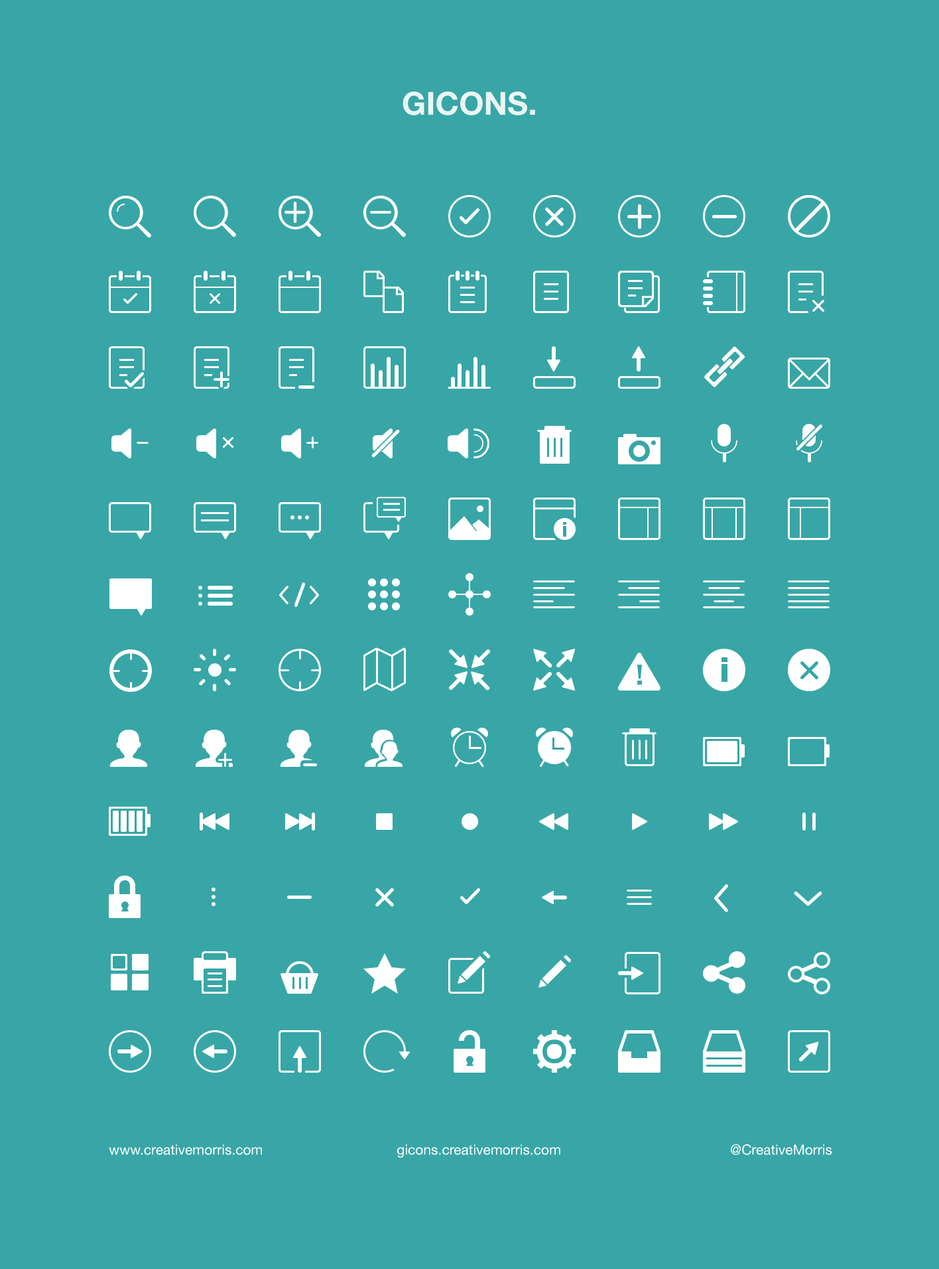
<style>
.page{position:relative;width:939px;height:1269px;background:#38a6a6}
.page>*{position:absolute;margin:0}
.t1{font:31.8px "HelveticaNeue-Bold";color:#ffffff}
.t2{font:13.9px "HelveticaNeue";color:#ffffff}
</style>
<div class="page">
<p class="t1" style="left:403px;top:92px;width:132px;height:23px;opacity:0.9">GICONS.</p>
<p class="t2" style="left:109px;top:1145px;width:153px;height:10px">www.creativemorris.com</p>
<p class="t2" style="left:397px;top:1145px;width:164px;height:13px">gicons.creativemorris.com</p>
<p class="t2" style="left:731px;top:1145px;width:102px;height:10px">@CreativeMorris</p>
</div>
